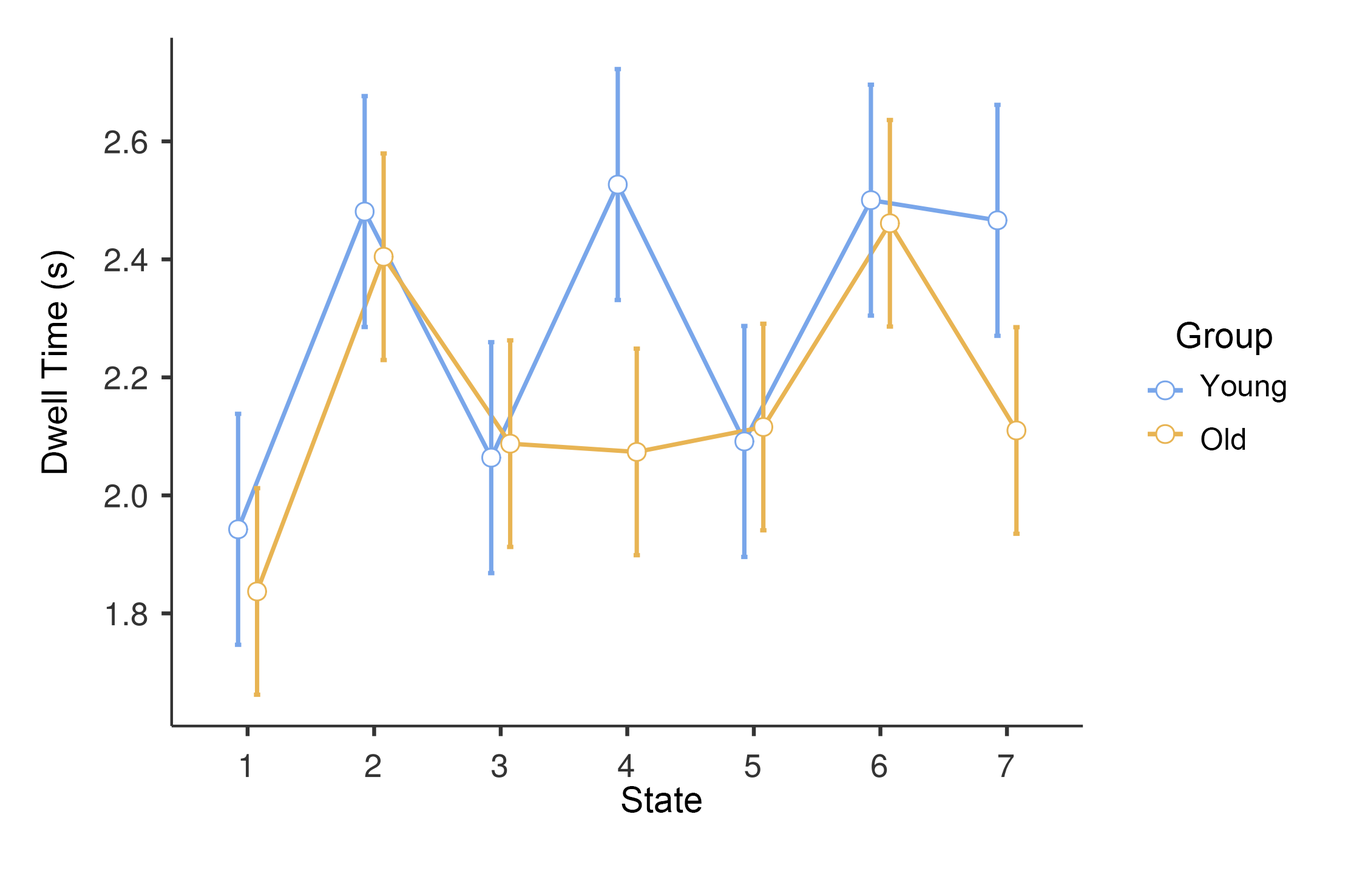
<style>
.page{position:relative;width:1348px;height:885px;background:#ffffff}
.page>*{position:absolute;margin:0}
.t1{font:35.4px "ArialMT";color:#000000}
.t2{font:30.3px "ArialMT";color:#000000}
</style>
<div class="page">
<p class="t1" style="left:41px;top:251px;width:34px;height:222px;rotate:-90deg">Dwell Time (s)</p>
<p class="t1" style="left:1177px;top:322px;width:95px;height:33px">Group</p>
<p class="t2" style="left:1200px;top:374px;width:86px;height:76px">Young<br>Old</p>
<p class="t1" style="left:621px;top:786px;width:80px;height:27px">State</p>
</div>
